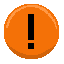
<style>
.page{position:relative;width:64px;height:64px;background:#f47107}
.page>*{position:absolute;margin:0}
.t1{font:45.8px "Minecraft";color:#000000}
</style>
<div class="page">
<p class="t1" style="left:28px;top:14px;width:6px;height:35px">!</p>
</div>
